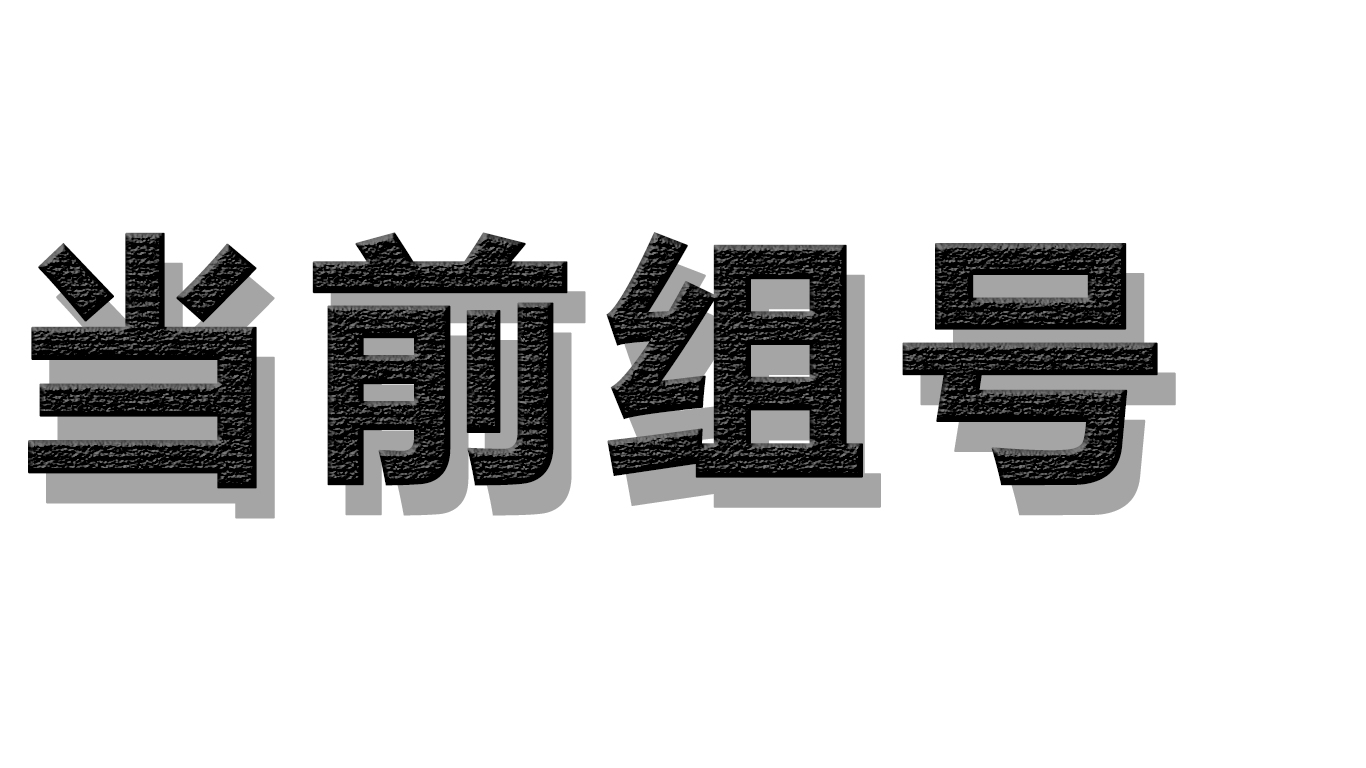
<style>
.page{position:relative;width:1366px;height:768px;background:#ffffff}
.page>*{position:absolute;margin:0}
.t1{font:261.6px "MicrosoftYaHei-Bold";letter-spacing:0.1em;color:#000000;font-weight:bold}
</style>
<div class="page">
<p class="t1" style="left:28px;top:232px;width:1130px;height:257px">当前组号</p>
</div>
